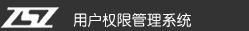
<style>
.page{position:relative;width:249px;height:31px;background:#333333}
.page>*{position:absolute;margin:0}
.t1{font:15px "ç»å¸ä¸­åç®-regular";letter-spacing:0.04em;color:#ffffff}
</style>
<div class="page">
<p class="t1" style="left:73px;top:13px;width:118px;height:14px">用户权限管理系统</p>
</div>
